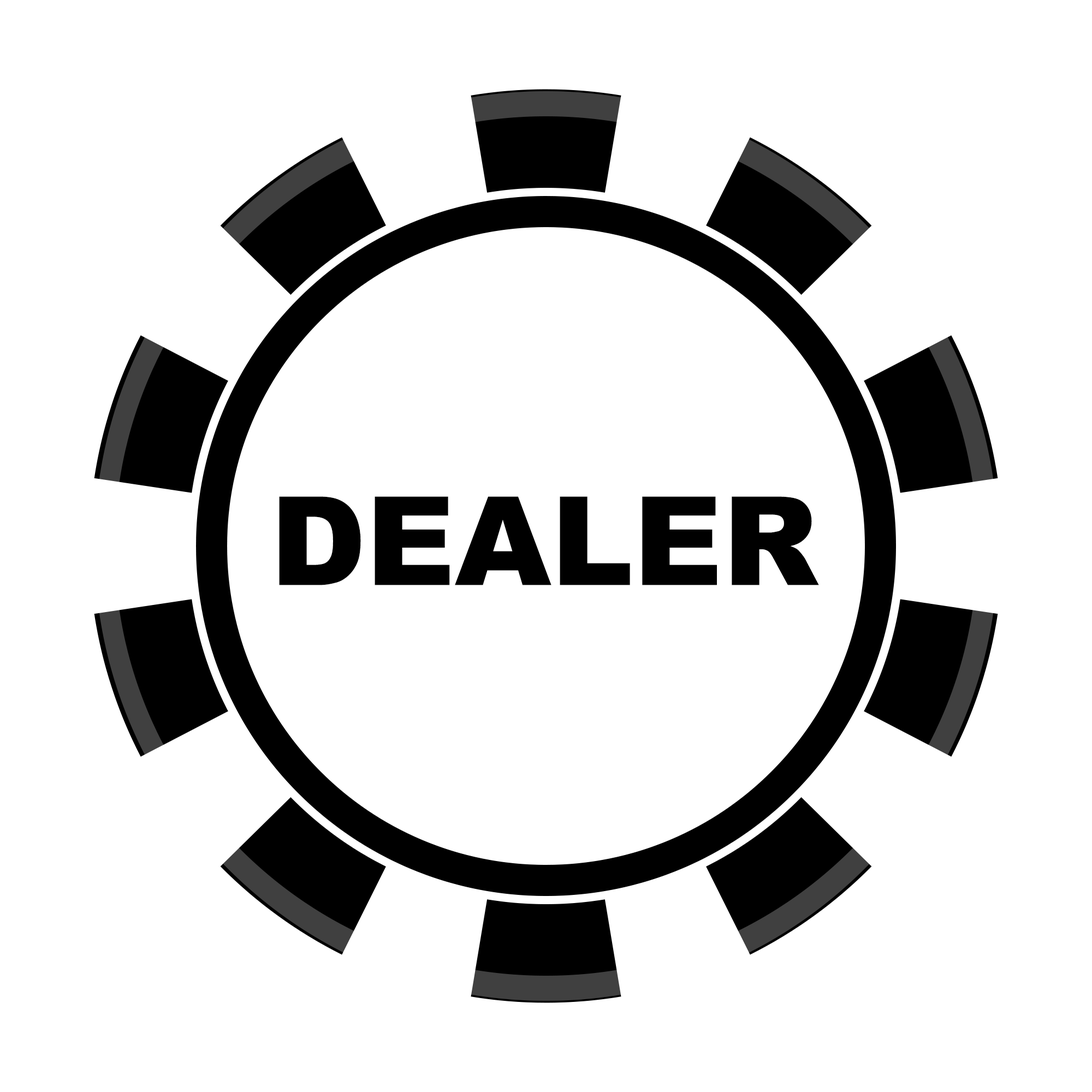
<style>
.page{position:relative;width:1092px;height:1092px;background:#ffffff}
.page>*{position:absolute;margin:0}
.t1{font:123.4px "Arial-Black";color:#000000}
</style>
<div class="page">
<p class="t1" style="left:279px;top:496px;width:540px;height:89px">DEALER</p>
</div>
